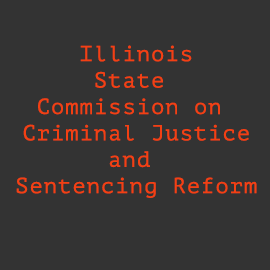
<style>
.page{position:relative;width:270px;height:270px;background:#333333}
.page>*{position:absolute;margin:0}
.t1{font:22px "PTMono-Regular";letter-spacing:0.05em;color:#f44013}
</style>
<div class="page">
<p class="t1" style="left:16px;top:45px;width:241px;height:153px;text-align:center">Illinois<br>State <br>Commission on <br>Criminal Justice<br>and <br>Sentencing Reform</p>
</div>
